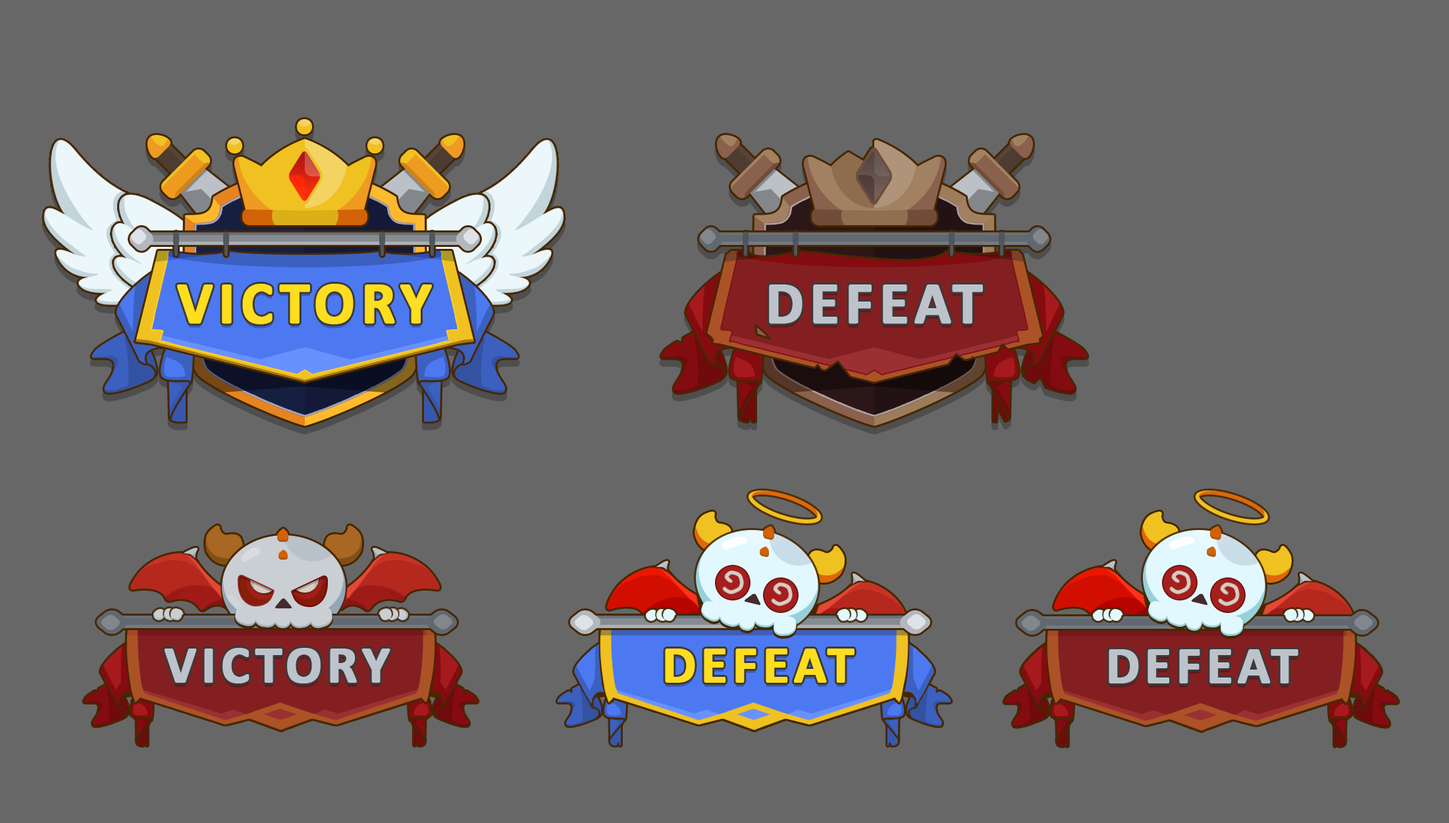
<style>
.page{position:relative;width:1449px;height:823px;background:#676767}
.page>*{position:absolute;margin:0}
.t1{font:60.1px "Calibri-Bold";letter-spacing:0.08em;color:#ffdd1f;font-weight:bold}
.t2{font:60.1px "Calibri-Bold";letter-spacing:0.08em;color:#bec3cb;font-weight:bold}
.t3{font:53px "Calibri-Bold";letter-spacing:0.08em;color:#bec3cb;font-weight:bold}
.t4{font:53px "Calibri-Bold";letter-spacing:0.08em;color:#ffdd1f;font-weight:bold}
</style>
<div class="page">
<p class="t1" style="left:177px;top:284px;width:255px;height:41px">VICTORY</p>
<p class="t2" style="left:769px;top:284px;width:214px;height:40px">DEFEAT</p>
<p class="t3" style="left:165px;top:648px;width:225px;height:35px">VICTORY</p>
<p class="t4" style="left:665px;top:648px;width:190px;height:35px">DEFEAT</p>
<p class="t3" style="left:1109px;top:649px;width:189px;height:34px">DEFEAT</p>
<p class="t3" style="left:1112px;top:648px;width:190px;height:35px">DEFEAT</p>
</div>
